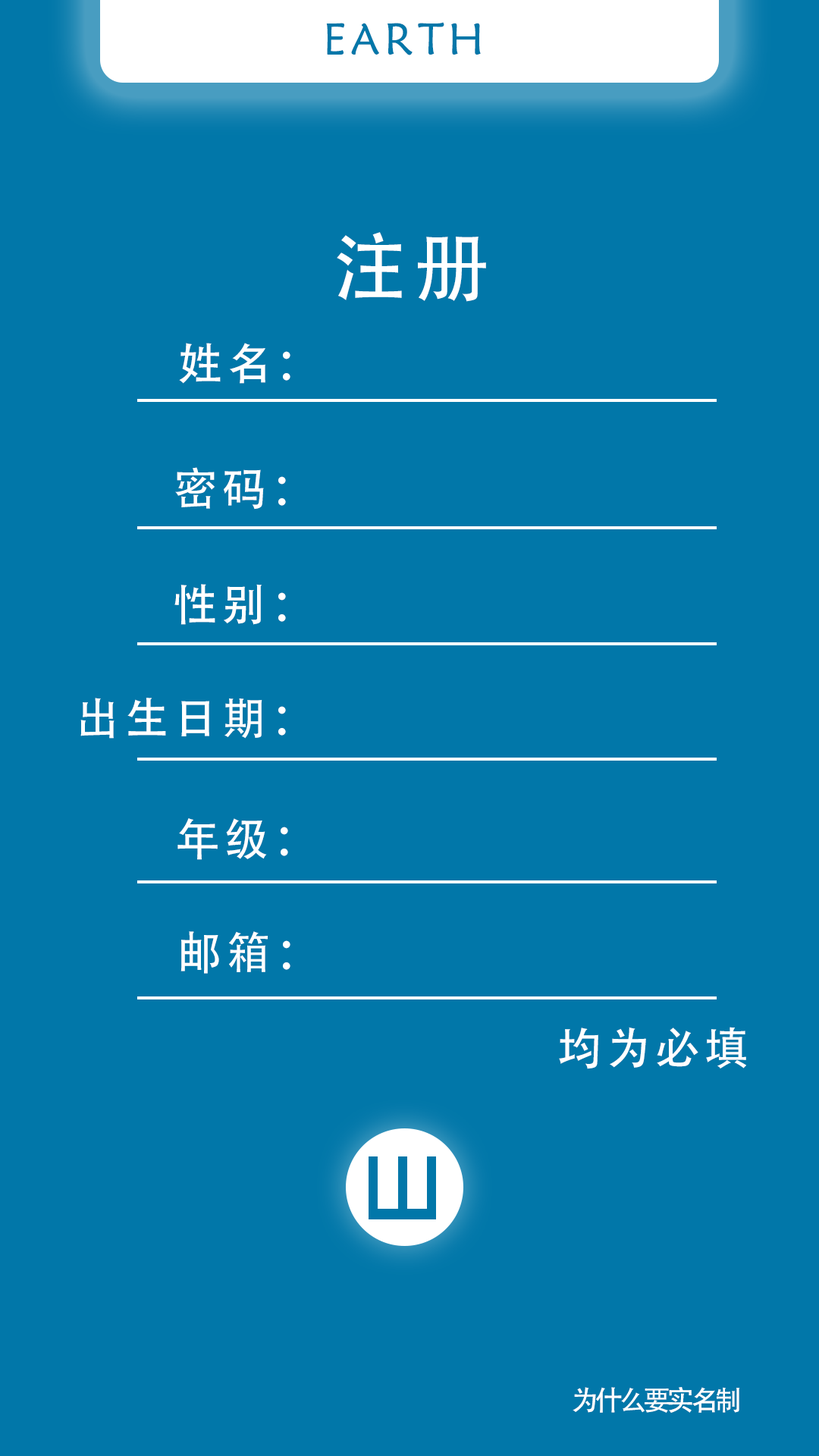
<style>
.page{position:relative;width:819px;height:1456px;background:#0177a9}
.page>*{position:absolute;margin:0}
.t1{font:44.5px "STXinwei";letter-spacing:0.1em;color:#0177a9}
.t2{font:74.8px "AdobeHeitiStd-Regular";letter-spacing:0.1em;color:#ffffff}
.t3{font:44.5px "AdobeHeitiStd-Regular";letter-spacing:0.1em;color:#ffffff}
.t4{font:27.8px "AdobeHeitiStd-Regular";letter-spacing:-0.14em;color:#ffffff}
</style>
<div class="page">
<p class="t1" style="left:326px;top:22px;width:155px;height:33px">EARTH</p>
<p class="t2" style="left:337px;top:232px;width:149px;height:70px">注册</p>
<p class="t3" style="left:179px;top:343px;width:111px;height:41px">姓名：</p>
<p class="t3" style="left:175px;top:467px;width:111px;height:43px">密码：</p>
<p class="t3" style="left:174px;top:584px;width:112px;height:41px">性别：</p>
<p class="t3" style="left:80px;top:698px;width:206px;height:41px">出生日期：</p>
<p class="t3" style="left:177px;top:818px;width:111px;height:42px">年级：</p>
<p class="t3" style="left:180px;top:931px;width:110px;height:43px">邮箱：</p>
<p class="t3" style="left:559px;top:1027px;width:187px;height:42px">均为必填</p>
<p class="t4" style="left:573px;top:1387px;width:167px;height:26px">为什么要实名制</p>
</div>
